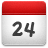
<style>
.page{position:relative;width:48px;height:48px}
.page>*{position:absolute;margin:0}
.t1{font:24px "AppleCasual";color:#3f3f3f}
</style>
<div class="page">
<p class="t1" style="left:12px;top:21px;width:23px;height:16px">24</p>
</div>
